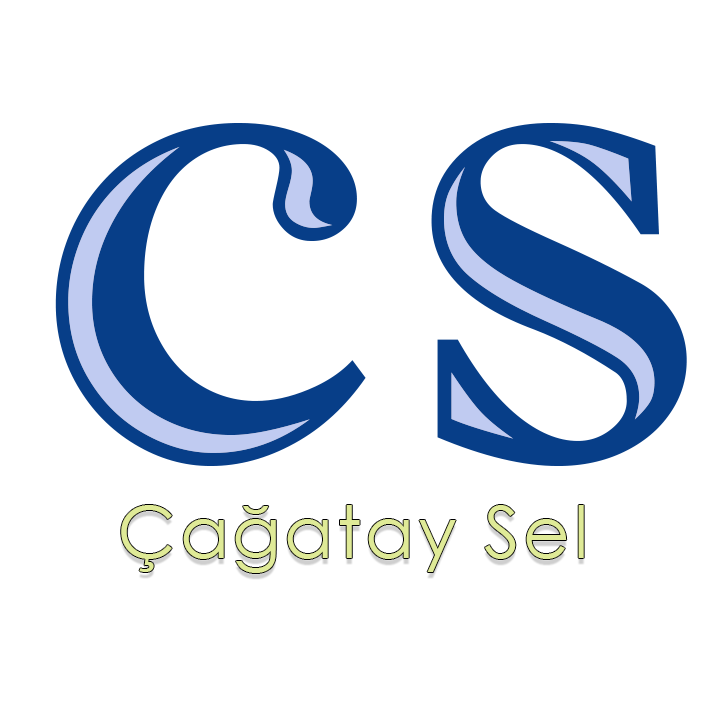
<style>
.page{position:relative;width:704px;height:704px;background:#ffffff}
.page>*{position:absolute;margin:0}
.t1{font:766.4px "ImprintMT-Shadow";letter-spacing:0.05em;color:#073e88}
.t2{font:72px "CenturyGothic";letter-spacing:0.05em;color:#dfea97}
</style>
<div class="page">
<p class="t1" style="left:55px;top:123px;width:632px;height:343px">cs</p>
<p class="t2" style="left:121px;top:505px;width:463px;height:68px">Çağatay Sel</p>
</div>
